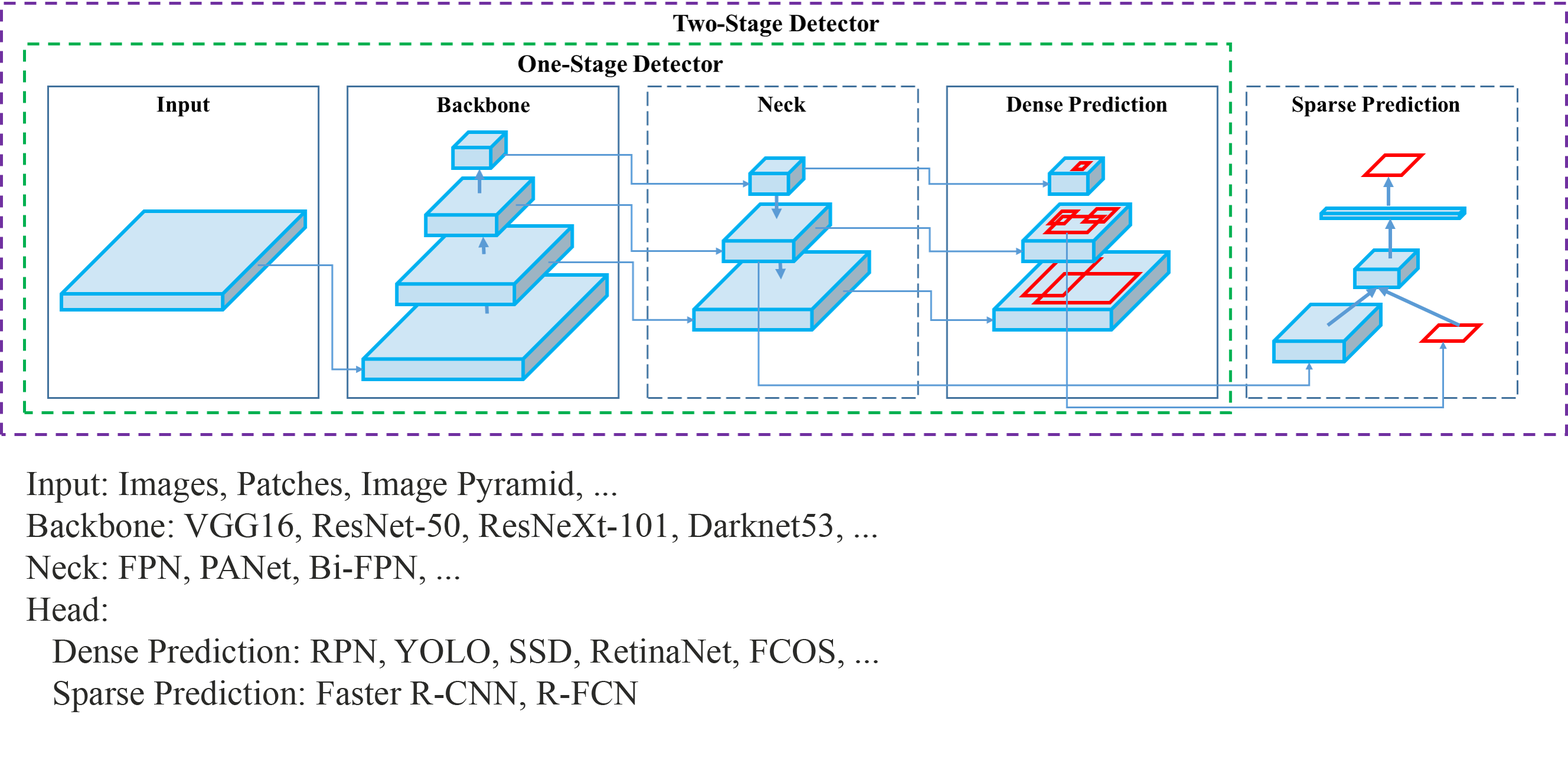
<style>
.page{position:relative;width:1568px;height:757px;background:#ffffff}
.page>*{position:absolute;margin:0}
.t1{font:34.9px "TimesNewRomanPSMT";color:#2a2a28}
</style>
<div class="page">
<p class="t1" style="left:25px;top:471px;width:853px;height:242px">Input: Images, Patches, Image Pyramid, ...<br>Backbone: VGG16, ResNet-50, ResNeXt-101, Darknet53, ...<br>Neck: FPN, PANet, Bi-FPN, ...<br>Head:<br> Dense Prediction: RPN, YOLO, SSD, RetinaNet, FCOS, ...<br> Sparse Prediction: Faster R-CNN, R-FCN</p>
</div>
